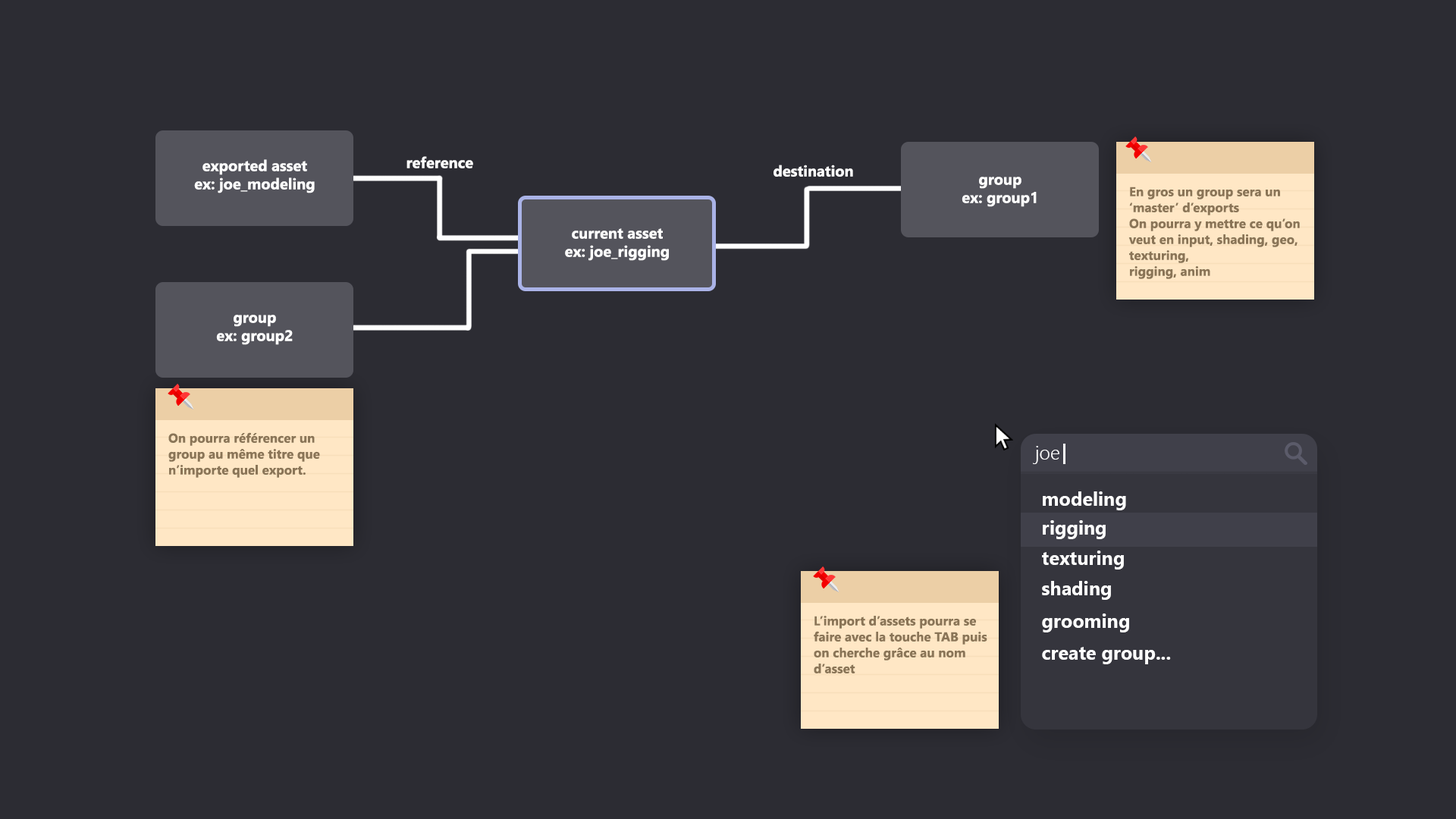
<style>
.page{position:relative;width:1456px;height:819px;background:#2c2c33}
.page>*{position:absolute;margin:0}
.t1{font:15.2px/18.2px "LeelawadeeUI-Bold";color:#ffffff}
.t2{font:15.2px "LeelawadeeUI-Bold";color:#ffffff}
.t3{font:12.9px/15.9px "LeelawadeeUI-Bold";color:#8a7557}
.t4{font:19px "LeelawadeeUI-Semilight";color:#ffffff}
.t5{font:19px "LeelawadeeUI-Bold";color:#ffffff}
</style>
<div class="page">
<p class="t1" style="left:194px;top:159px;width:121px;height:34px;text-align:center">exported asset<br>ex: joe_modeling</p>
<p class="t2" style="left:406px;top:156px;width:67px;height:12px">reference</p>
<p class="t2" style="left:773px;top:165px;width:80px;height:12px">destination</p>
<p class="t1" style="left:962px;top:177px;width:75px;height:30px;text-align:center">group<br>ex: group1</p>
<p class="t3" style="left:1128px;top:187px;width:172px;height:92px">En gros un group sera un ‘master’ d’exports<br>On pourra y mettre ce qu’on veut en input, shading, geo, texturing,<br>rigging, anim</p>
<p class="t1" style="left:565px;top:228px;width:104px;height:33px;text-align:center">current asset<br>ex: joe_rigging</p>
<p class="t1" style="left:216px;top:315px;width:77px;height:30px;text-align:center">group<br>ex: group2</p>
<p class="t3" style="left:168px;top:432px;width:152px;height:46px">On pourra référencer un group au même titre que n’importe quel export.</p>
<p class="t4" style="left:1033px;top:446px;width:26px;height:18px">joe</p>
<p class="t5" style="left:1043px;top:491px;width:83px;height:19px">modeling</p>
<p class="t5" style="left:1043px;top:520px;width:63px;height:19px">rigging</p>
<p class="t5" style="left:1042px;top:551px;width:82px;height:19px">texturing</p>
<p class="t5" style="left:1042px;top:581px;width:69px;height:19px">shading</p>
<p class="t3" style="left:814px;top:616px;width:173px;height:57px">L’import d’assets pourra se faire avec la touche TAB puis on cherche grâce au nom d’asset</p>
<p class="t5" style="left:1042px;top:613px;width:87px;height:19px">grooming</p>
<p class="t5" style="left:1042px;top:647px;width:129px;height:17px">create group...</p>
</div>
